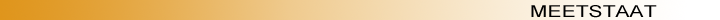
<style>
.page{position:relative;width:720px;height:20px}
.page>*{position:absolute;margin:0}
.t1{font:16.2px "ArialMT";color:#000000;scale:1.3 1}
</style>
<div class="page">
<p class="t1" style="left:531px;top:5px;width:126px;height:13px">MEETSTAAT</p>
</div>
